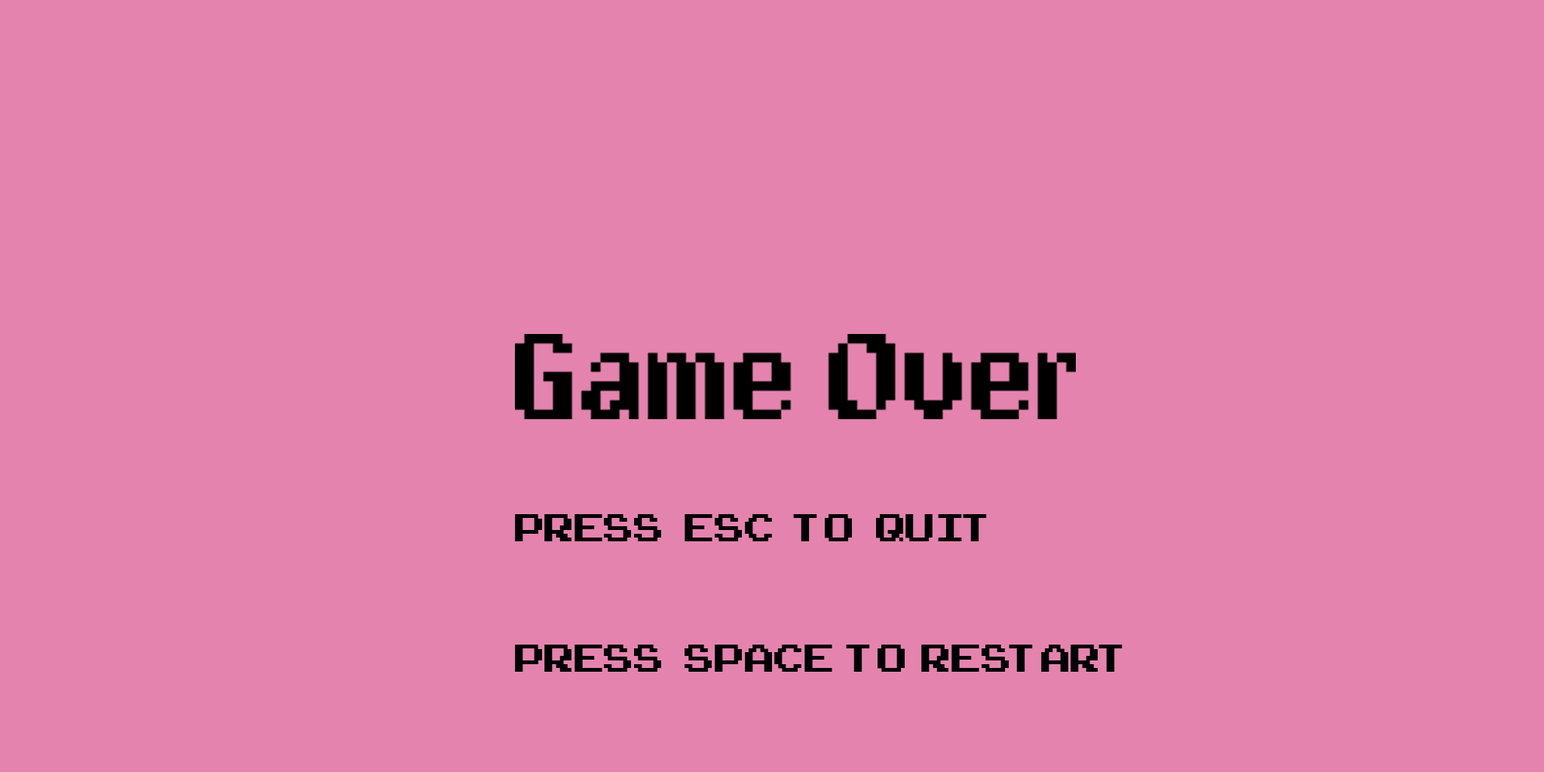
<style>
.page{position:relative;width:1544px;height:772px;background:#e484ae}
.page>*{position:absolute;margin:0}
.t1{font:54.3px "ArcadeClassic";color:#000205}
</style>
<div class="page">
<p class="t1" style="left:515px;top:514px;width:608px;height:158px">PRESS   ESC   TO   QUIT<br><br>PRESS   SPACE  TO  RESTART</p>
</div>
